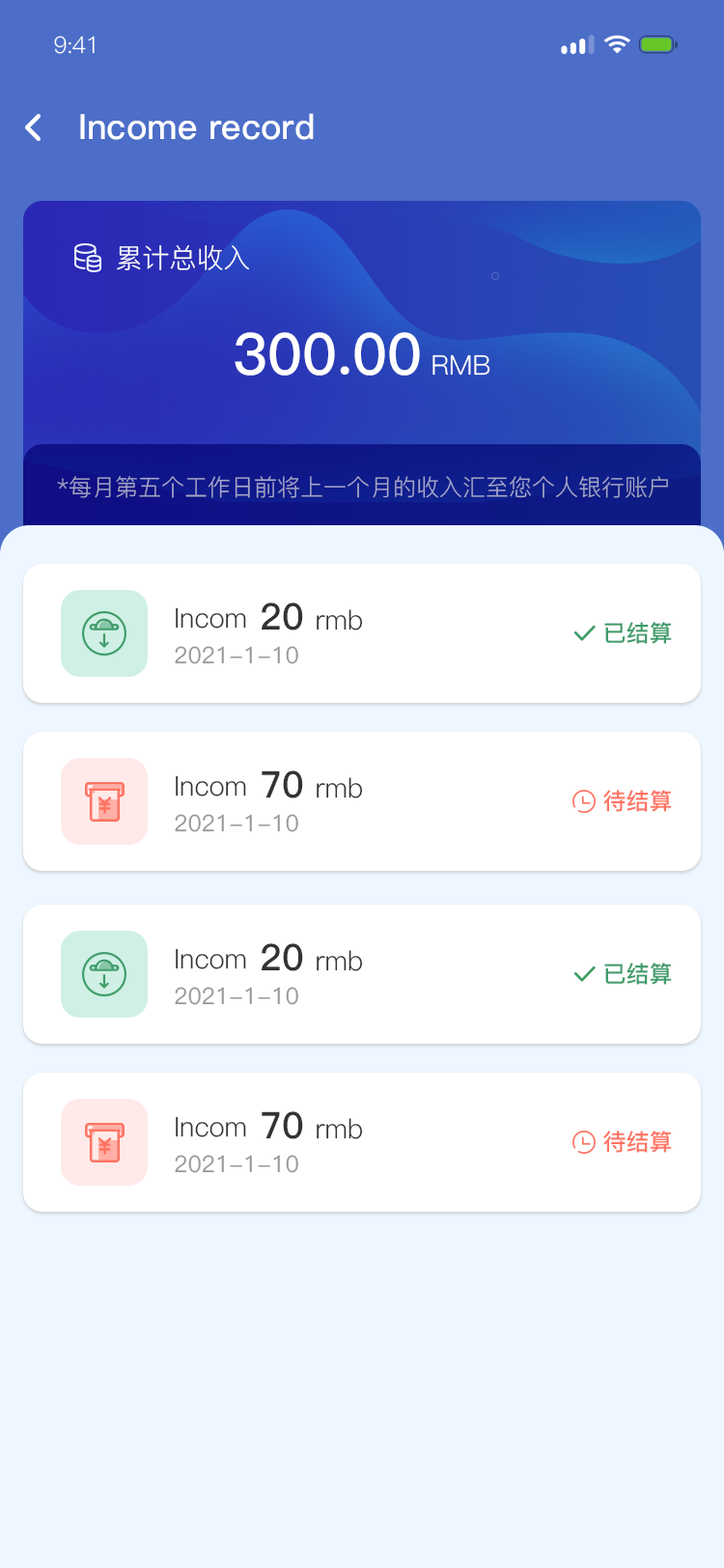
<style>
.page{position:relative;width:724px;height:1568px;background:#eef6ff}
.page>*{position:absolute;margin:0}
.t1{font:23.2px "PingFang-SC-Regular";letter-spacing:-0.025em;color:#ffffff}
.t2{font:34.8px "PingFang-SC-Bold";color:#ffffff}
.t3{font:34.8px "PingFang-SC-Bold";color:#ffffff;text-transform:uppercase}
.t4{font:27px "PingFang-SC-Regular";color:#ffffff}
.t5{font:57.9px "PingFang-SC-Bold";color:#ffffff}
.t6{font:23.2px "PingFang-SC-Regular";color:#a6a8ca}
.t7{font:27px "PingFang-SC-Regular";color:#333333}
.t8{font:36.7px "PingFang-SC-Bold";color:#333333}
.t9{font:23.2px "PingFang-SC-Bold";color:#409d6a}
.t10{font:23.2px "PingFang-SC-Medium";color:#999999}
.t11{font:23.2px "PingFang-SC-Bold";color:#ff7463}
</style>
<div class="page">
<p class="t1" style="left:54px;top:36px;width:41px;height:18px">9:41</p>
<p class="t2" style="left:80px;top:113px;width:234px;height:27px"><span class="t3">i</span>ncome record</p>
<p class="t4" style="left:117px;top:245px;width:132px;height:25px">累计总收入</p>
<p class="t5" style="left:235px;top:332px;width:255px;height:44px">300.00<span class="t4"> RMB</span></p>
<p class="t6" style="left:57px;top:476px;width:611px;height:22px">*每月第五个工作日前将上一个月的收入汇至您个人银行账户</p>
<p class="t7" style="left:262px;top:602px;width:101px;height:28px"><span class="t8">20 </span>rmb</p>
<p class="t7" style="left:176px;top:607px;width:70px;height:22px">Incom</p>
<p class="t9" style="left:604px;top:622px;width:68px;height:22px">已结算</p>
<p class="t10" style="left:175px;top:646px;width:123px;height:18px">2021-1-10</p>
<p class="t7" style="left:262px;top:770px;width:101px;height:28px"><span class="t8">70 </span>rmb</p>
<p class="t7" style="left:176px;top:775px;width:70px;height:22px">Incom</p>
<p class="t11" style="left:603px;top:790px;width:69px;height:22px">待结算</p>
<p class="t10" style="left:175px;top:814px;width:123px;height:18px">2021-1-10</p>
<p class="t7" style="left:176px;top:948px;width:70px;height:21px">Incom</p>
<p class="t7" style="left:262px;top:943px;width:101px;height:28px"><span class="t8">20 </span>rmb</p>
<p class="t9" style="left:604px;top:963px;width:68px;height:22px">已结算</p>
<p class="t10" style="left:175px;top:987px;width:123px;height:18px">2021-1-10</p>
<p class="t7" style="left:176px;top:1116px;width:70px;height:21px">Incom</p>
<p class="t7" style="left:262px;top:1111px;width:101px;height:28px"><span class="t8">70 </span>rmb</p>
<p class="t11" style="left:603px;top:1131px;width:69px;height:22px">待结算</p>
<p class="t10" style="left:175px;top:1155px;width:123px;height:18px">2021-1-10</p>
</div>
